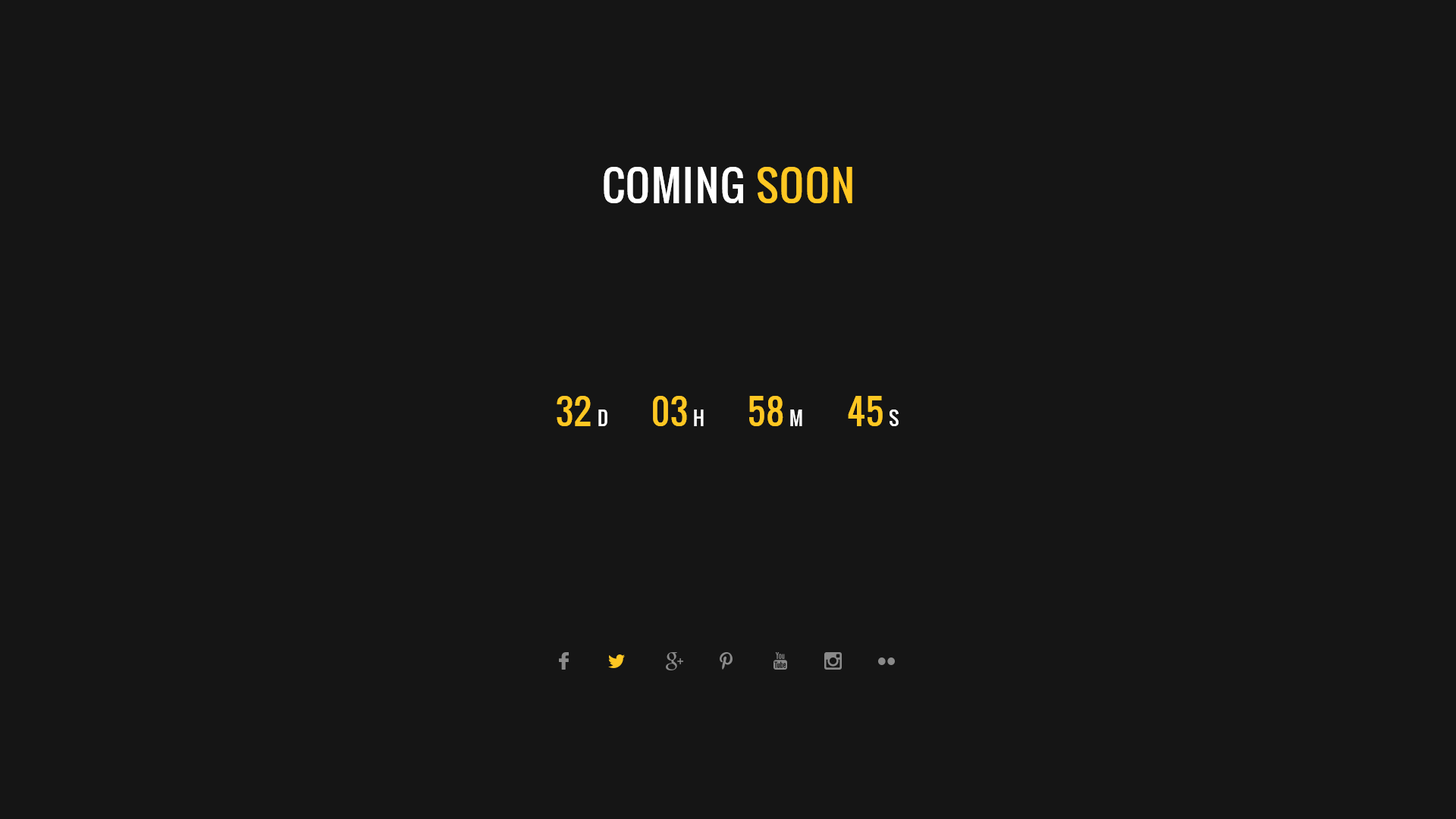
<style>
.page{position:relative;width:1456px;height:819px;background:#151515}
.page>*{position:absolute;margin:0}
.t1{font:41.7px "Oswald-Regular";letter-spacing:0.035em;color:#ffffff;text-transform:uppercase}
.t2{font:41.7px "Oswald-Regular";letter-spacing:0.035em;color:#ffc722;text-transform:uppercase}
.t3{font:34.1px "Oswald-Regular";letter-spacing:0.035em;color:#ffc722;text-transform:uppercase}
.t4{font:19px "Oswald-Regular";letter-spacing:0.035em;color:#ffffff;text-transform:uppercase}
</style>
<div class="page">
<p class="t1" style="left:604px;top:167px;width:248px;height:36px">Coming <span class="t2">soon</span></p>
<p class="t3" style="left:557px;top:396px;width:34px;height:30px">32</p>
<p class="t3" style="left:653px;top:396px;width:34px;height:30px">03</p>
<p class="t3" style="left:749px;top:396px;width:34px;height:30px">58</p>
<p class="t3" style="left:848px;top:396px;width:35px;height:30px">45</p>
<p class="t4" style="left:598px;top:409px;width:9px;height:17px">D</p>
<p class="t4" style="left:694px;top:409px;width:10px;height:17px">h</p>
<p class="t4" style="left:790px;top:409px;width:12px;height:17px">m</p>
<p class="t4" style="left:890px;top:409px;width:9px;height:17px">s</p>
</div>
